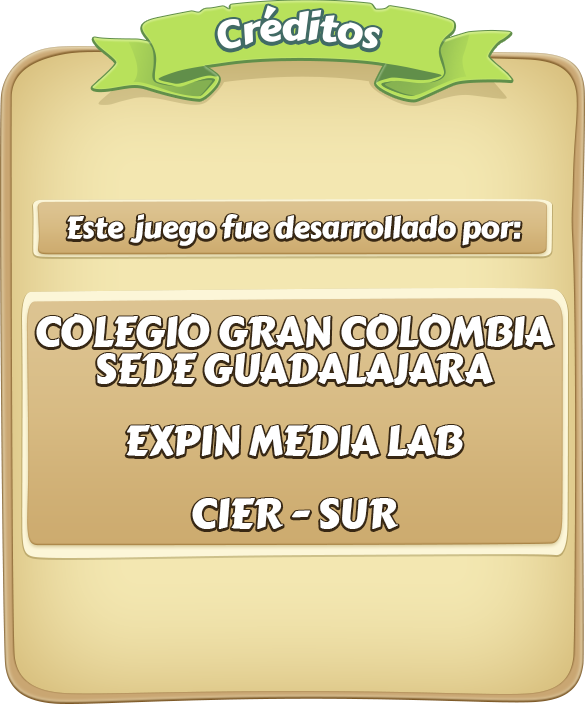
<style>
.page{position:relative;width:585px;height:704px}
.page>*{position:absolute;margin:0}
.t1{font:38px "CarterOne";letter-spacing:-0.02em;color:#ffffff}
.t2{font:42px/36.2px "CarterOne";letter-spacing:-0.02em;color:#ffffff}
.t3{font:30px/36.2px "CarterOne";letter-spacing:-0.02em;color:#ffffff}
</style>
<div class="page">
<p class="t1" style="left:217px;top:5px;width:163px;height:44px">Créditos</p>
<p class="t2" style="left:36px;top:214px;width:518px;height:315px;text-align:center"><span class="t3">Este  juego fue desarrollado por:<br><br><br></span>COLEGIO GRAN COLOMBIA<br>SEDE GUADALAJARA<br><br>EXPIN MEDIA LAB<br><br>CIER - SUR</p>
</div>
